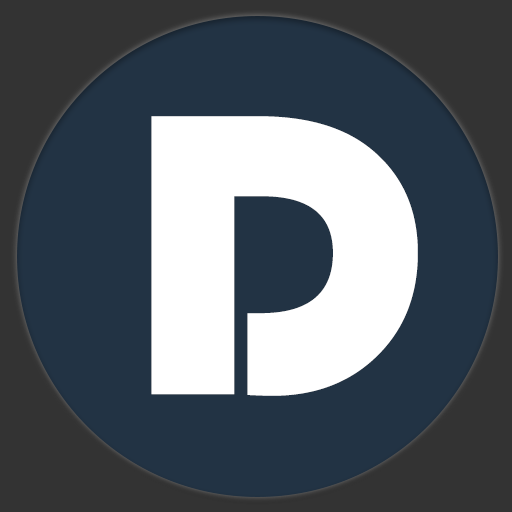
<style>
.page{position:relative;width:512px;height:512px;background:#223344}
.page>*{position:absolute;margin:0}
.t1{font:416.7px "Bauhaus93";color:#ffffff}
</style>
<div class="page">
<p class="t1" style="left:151px;top:116px;width:267px;height:280px">D</p>
</div>
